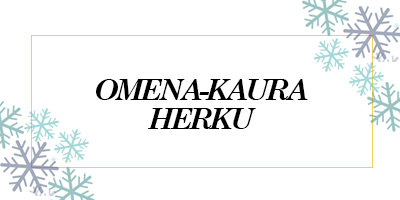
<style>
.page{position:relative;width:400px;height:200px;background:#ffffff}
.page>*{position:absolute;margin:0}
.t1{font:29.2px/29.2px "CenturySchoolbook-BoldItalic";letter-spacing:-0.1em;color:#000000}
</style>
<div class="page">
<p class="t1" style="left:96px;top:79px;width:212px;height:50px;text-align:center">OMENA-KAURA<br>HERKU</p>
</div>
